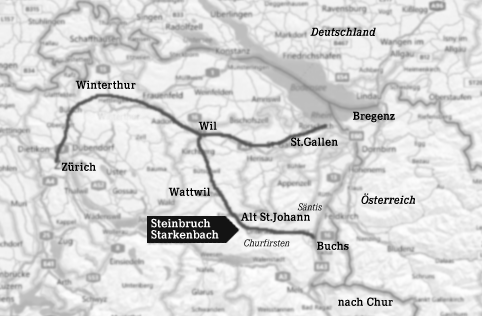
<style>
.page{position:relative;width:482px;height:316px}
.page>*{position:absolute;margin:0}
.t1{font:12px "CorporateE-BoldItalic";color:#000000}
.t2{font:12px "CorporateE-Bold";color:#000000}
.t3{font:10px "CorporateE-RegularItalic"}
.t4{font:12.2px/11.2px "CorporateE-Bold";color:#fefefe}
</style>
<div class="page">
<p class="t1" style="left:310px;top:27px;width:66px;height:9px">Deutschland</p>
<p class="t2" style="left:75px;top:80px;width:61px;height:9px">Winterthur</p>
<p class="t2" style="left:353px;top:111px;width:42px;height:12px">Bregenz</p>
<p class="t2" style="left:198px;top:121px;width:19px;height:9px">Wil</p>
<p class="t2" style="left:291px;top:137px;width:47px;height:9px">St.Gallen</p>
<p class="t2" style="left:62px;top:162px;width:34px;height:9px">Zürich</p>
<p class="t2" style="left:168px;top:187px;width:42px;height:9px">Wattwil</p>
<p class="t1" style="left:361px;top:193px;width:54px;height:11px">Österreich</p>
<p class="t3" style="left:297px;top:203px;width:25px;height:8px">Säntis</p>
<p class="t4" style="left:151px;top:218px;width:68px;height:21px">Steinbruch <br>Starkenbach</p>
<p class="t2" style="left:240px;top:212px;width:70px;height:11px">Alt St.Johann</p>
<p class="t3" style="left:244px;top:239px;width:46px;height:8px">Churfirsten</p>
<p class="t2" style="left:317px;top:241px;width:32px;height:9px">Buchs</p>
<p class="t2" style="left:338px;top:297px;width:55px;height:9px">nach Chur</p>
</div>
